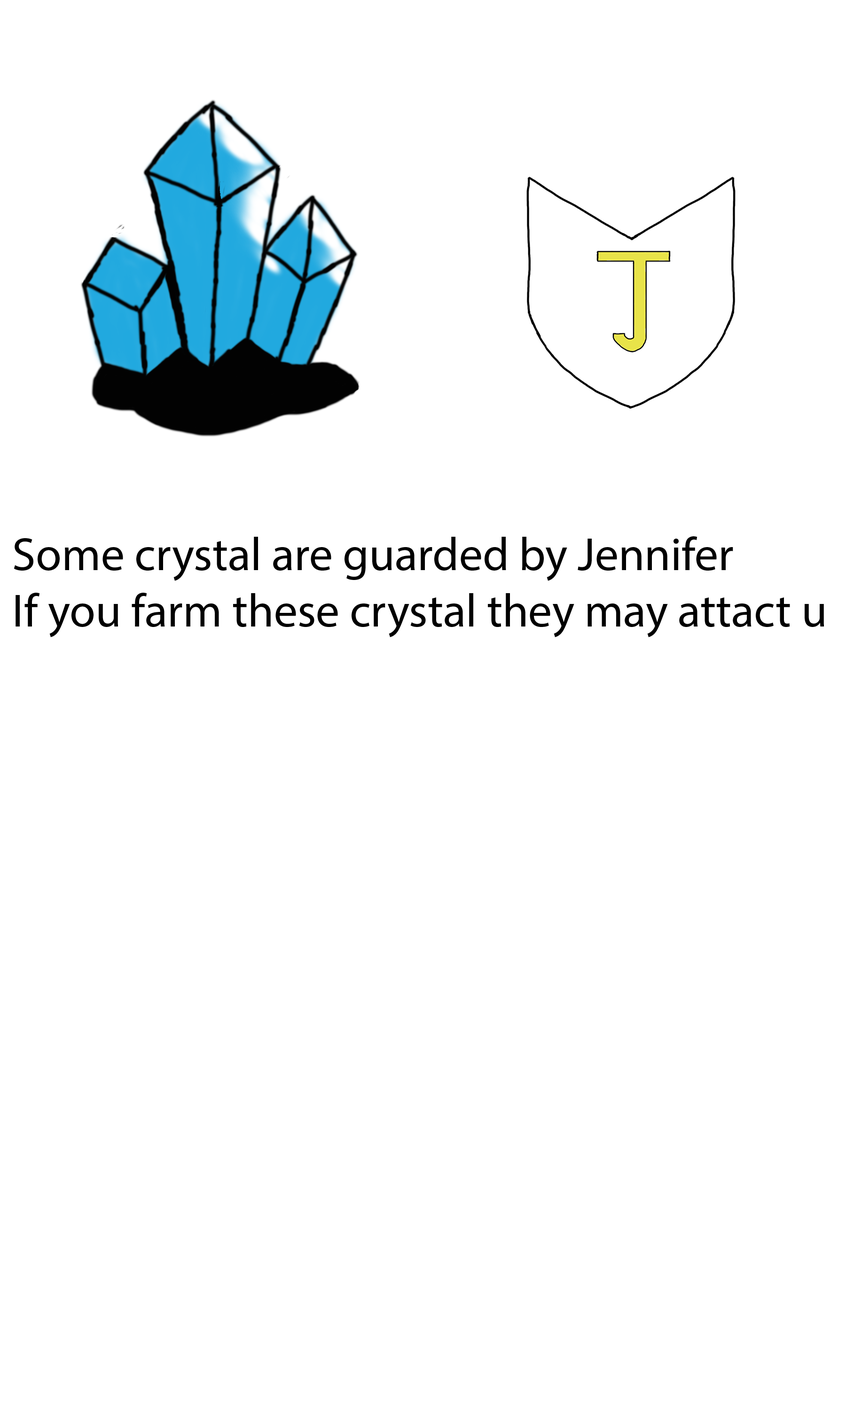
<style>
.page{position:relative;width:846px;height:1410px;background:#ffffff}
.page>*{position:absolute;margin:0}
.t1{font:47px "MyriadPro-Regular";color:#000000}
</style>
<div class="page">
<p class="t1" style="left:14px;top:536px;width:810px;height:101px">Some crystal are guarded by Jennifer<br>If you farm these crystal they may attact u</p>
</div>
